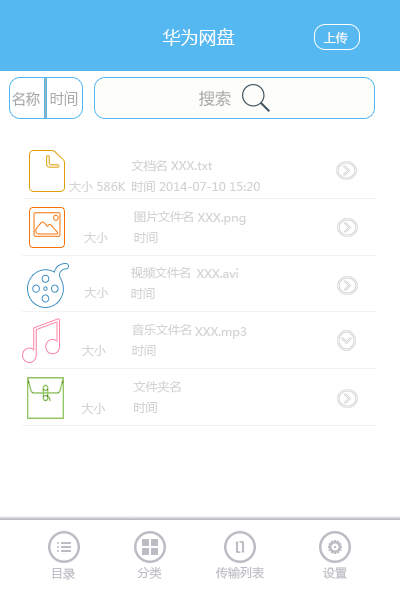
<style>
.page{position:relative;width:400px;height:600px;background:#ffffff}
.page>*{position:absolute;margin:0}
.t1{font:18px "MicrosoftYaHei";color:#ffffff}
.t2{font:12px "MicrosoftYaHei";color:#ffffff}
.t3{font:14.4px "MicrosoftYaHei";color:#aaaaaa}
.t4{font:16.2px "MicrosoftYaHei";color:#aaaaaa;scale:0.87 1}
.t5{font:16px "MicrosoftYaHei";color:#aaaaaa}
.t6{font:12px "MicrosoftYaHei";color:#d3d4d2}
.t7{font:12px "MicrosoftYaHei";color:#bcbcc4}
</style>
<div class="page">
<p class="t1" style="left:162px;top:28px;width:73px;height:18px">华为网盘</p>
<p class="t2" style="left:323px;top:31px;width:25px;height:13px">上传</p>
<p class="t3" style="left:12px;top:91px;width:28px;height:16px">名称</p>
<p class="t4" style="left:50px;top:91px;width:28px;height:15px">时间</p>
<p class="t5" style="left:199px;top:90px;width:32px;height:17px">搜索</p>
<p class="t6" style="left:131px;top:160px;width:129px;height:32px">文档名 XXX.txt<br>时间 2014-07-10 15:20</p>
<p class="t6" style="left:69px;top:181px;width:57px;height:11px">大小 586K</p>
<p class="t6" style="left:134px;top:211px;width:59px;height:32px">图片文件名<br>时间</p>
<p class="t6" style="left:197px;top:213px;width:49px;height:12px">XXX.png</p>
<p class="t6" style="left:84px;top:232px;width:24px;height:11px">大小</p>
<p class="t6" style="left:131px;top:267px;width:59px;height:32px">视频文件名<br>时间</p>
<p class="t6" style="left:196px;top:268px;width:42px;height:10px">XXX.avi</p>
<p class="t6" style="left:84px;top:287px;width:25px;height:11px">大小</p>
<p class="t6" style="left:132px;top:323px;width:59px;height:33px">音乐文件名<br>时间</p>
<p class="t6" style="left:195px;top:327px;width:52px;height:12px">XXX.mp3</p>
<p class="t6" style="left:82px;top:345px;width:24px;height:11px">大小</p>
<p class="t6" style="left:133px;top:380px;width:48px;height:33px">文件夹名<br>时间</p>
<p class="t6" style="left:81px;top:403px;width:25px;height:11px">大小</p>
<p class="t7" style="left:52px;top:568px;width:23px;height:12px">目录</p>
<p class="t7" style="left:137px;top:566px;width:25px;height:13px">分类</p>
<p class="t7" style="left:215px;top:566px;width:49px;height:13px">传输列表</p>
<p class="t7" style="left:323px;top:567px;width:24px;height:12px">设置</p>
</div>
